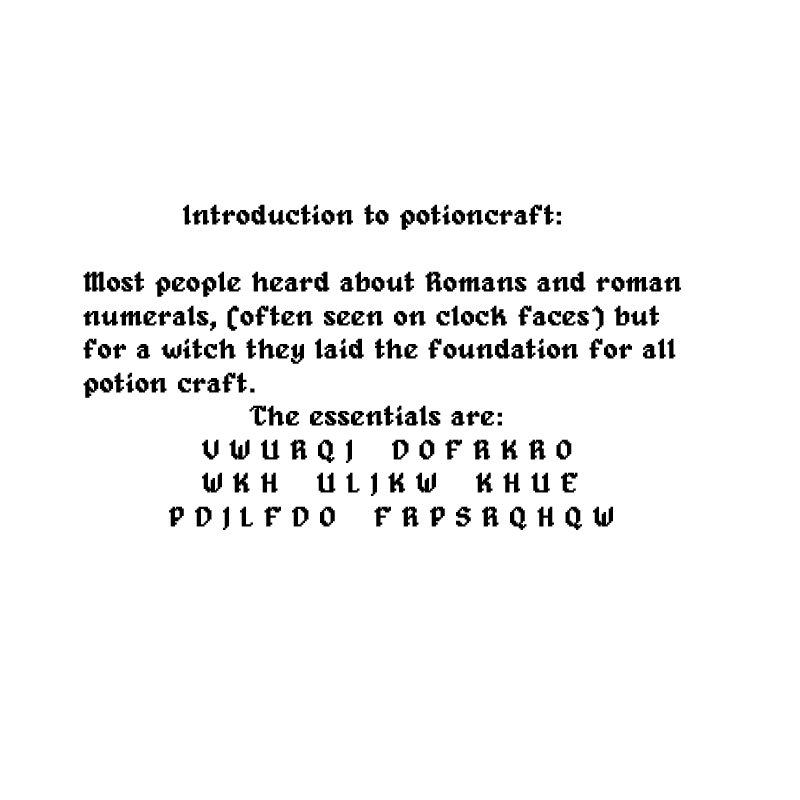
<style>
.page{position:relative;width:800px;height:800px;background:#ffffff}
.page>*{position:absolute;margin:0}
.t1{font:27.9px "Alagard";color:#000000;font-weight:bold}
</style>
<div class="page">
<p class="t1" style="left:83px;top:204px;width:598px;height:326px">Introduction to potioncraft:<br><br>Most people heard about Romans and roman <br>numerals, (often seen on clock faces) but <br>for a witch they laid the foundation for all <br>potion craft. <br>        The essentials are:<br>   V W U R Q J    D O F R K R O<br>   W K H    U L J K W    K H U E<br>         P D J L F D O    F R P S R Q H Q W</p>
</div>
